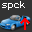
<style>
.page{position:relative;width:32px;height:32px;background:#333333}
.page>*{position:absolute;margin:0}
.t1{font:9px "Monaco";letter-spacing:0.06em;color:#ffffff}
.t2{font:23.7px "Monaco";letter-spacing:0.06em;color:#ff0000}
</style>
<div class="page">
<p class="t1" style="left:2px;top:1px;width:23px;height:9px">spck</p>
<p class="t2" style="left:20px;top:18px;width:10px;height:12px;rotate:-90deg">→</p>
</div>
